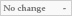
<style>
.page{position:relative;width:72px;height:16px;background:#f9f9f9}
.page>*{position:absolute;margin:0}
.t1{font:8.8px "TeXGyrePagella-Bold";color:#7f7f7f}
</style>
<div class="page">
<p class="t1" style="left:3px;top:4px;width:63px;height:9px">No change        -</p>
</div>
